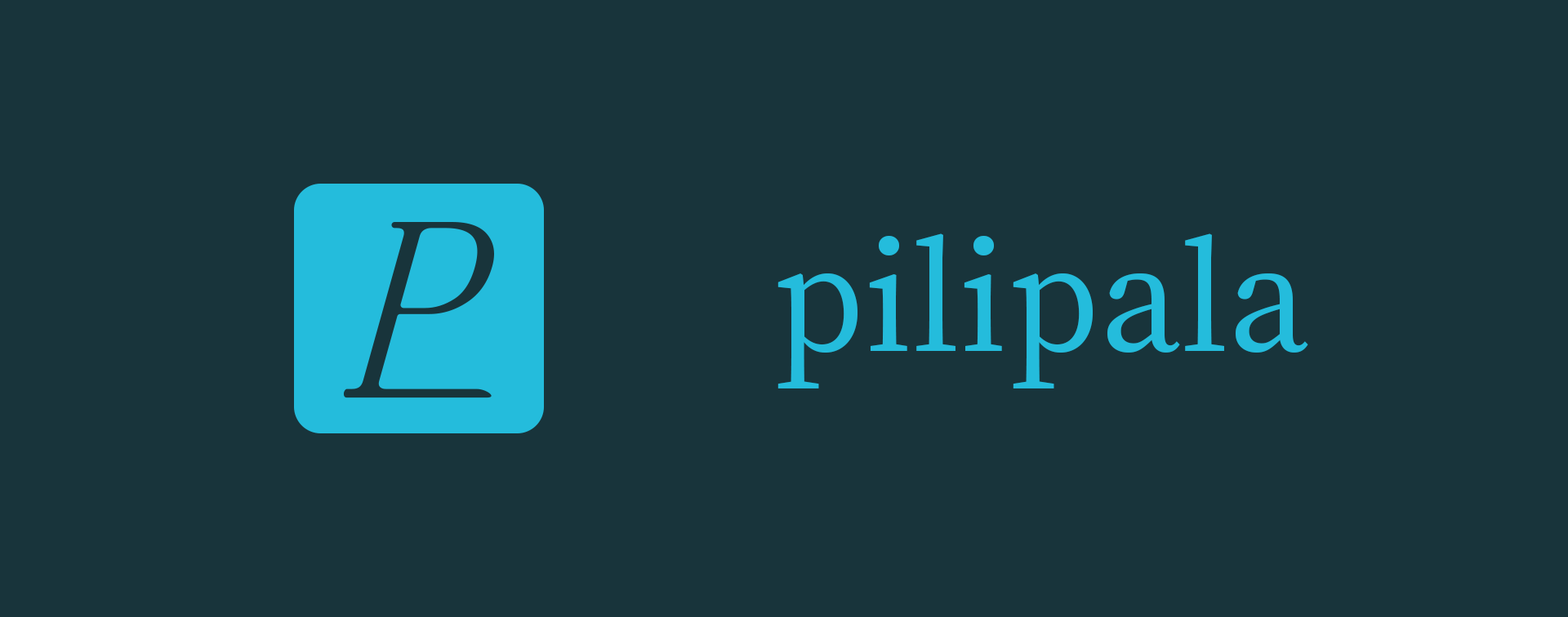
<style>
.page{position:relative;width:1568px;height:617px;background:#18343b}
.page>*{position:absolute;margin:0}
.t1{font:144.7px "SourceHanSerifCN-Medium";color:#24bcdc}
</style>
<div class="page">
<p class="t1" style="left:777px;top:234px;width:531px;height:155px">pilipala</p>
</div>
